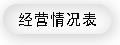
<style>
.page{position:relative;width:120px;height:45px}
.page>*{position:absolute;margin:0}
.t1{font:16px "SimHei";color:#0a0a0a;scale:0.95 1}
</style>
<div class="page">
<p class="t1" style="left:19px;top:12px;width:77px;height:15px">经营情况表</p>
</div>
